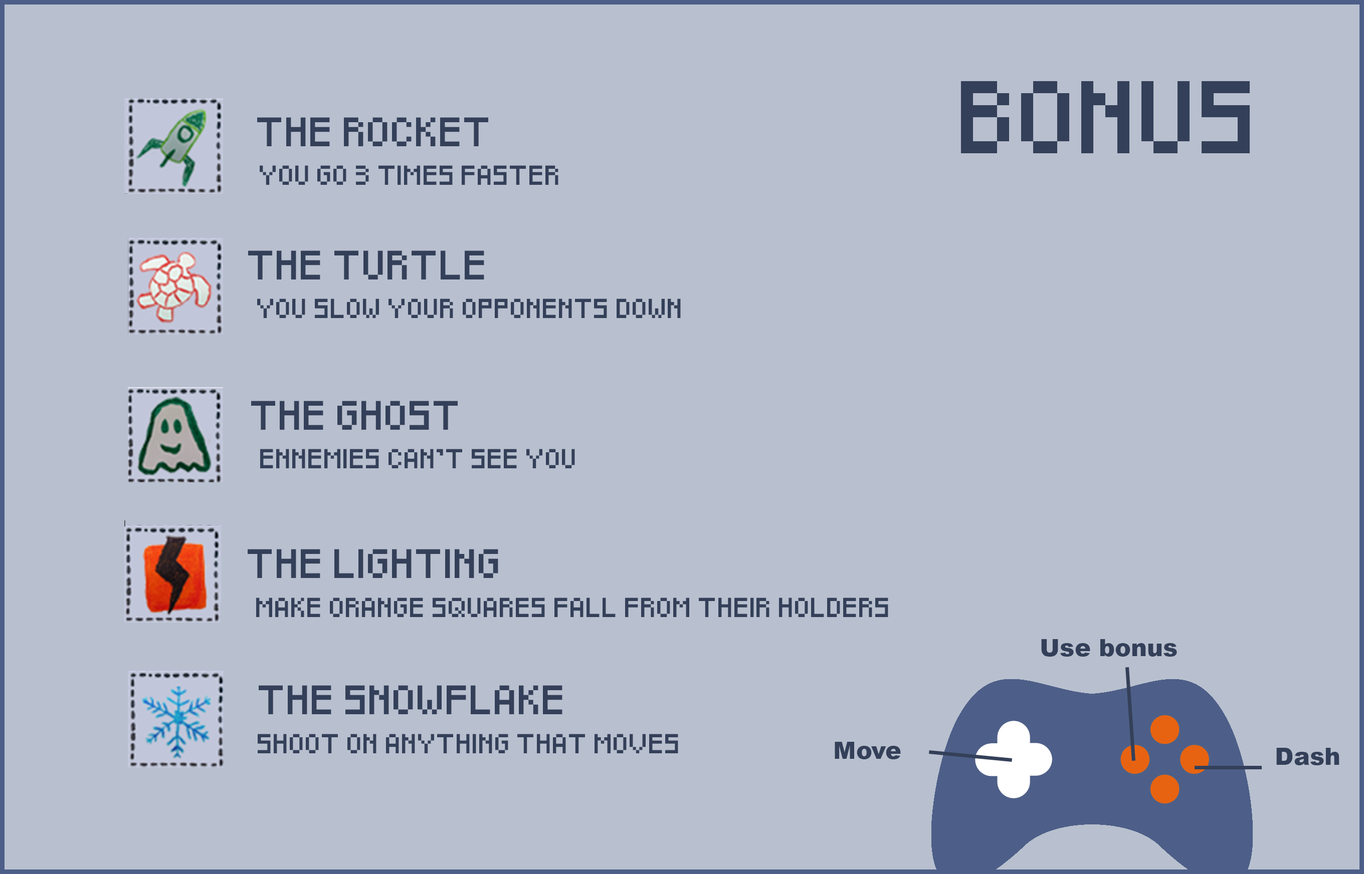
<style>
.page{position:relative;width:1364px;height:874px;background:#b8c0cf}
.page>*{position:absolute;margin:0}
.t1{font:60.1px "Pixeled";color:#344059}
.t2{font:24.1px "Pixeled";color:#344059}
.t3{font:16px "Pixeled";color:#344059}
.t4{font:24.1px "Arial-Black";color:#344059}
</style>
<div class="page">
<p class="t1" style="left:961px;top:81px;width:288px;height:72px">BONUS</p>
<p class="t2" style="left:257px;top:117px;width:231px;height:29px">THE ROCKET</p>
<p class="t3" style="left:260px;top:165px;width:298px;height:20px">YOU GO 3 TIMES FASTER</p>
<p class="t2" style="left:248px;top:251px;width:236px;height:29px">THE TURTLE</p>
<p class="t3" style="left:257px;top:299px;width:424px;height:19px">YOU SLOW YOUR OPPONENTS DOWN</p>
<p class="t2" style="left:251px;top:401px;width:207px;height:29px">THE GHOST</p>
<p class="t3" style="left:260px;top:449px;width:315px;height:20px">ENNEMIES CAN’T SEE YOU</p>
<p class="t2" style="left:248px;top:549px;width:250px;height:29px">THE LIGHTING</p>
<p class="t3" style="left:256px;top:598px;width:632px;height:19px">MAKE ORANGE SQUARES FALL FROM THEIR HOLDERS</p>
<p class="t4" style="left:1041px;top:639px;width:136px;height:18px">Use bonus</p>
<p class="t2" style="left:259px;top:686px;width:303px;height:29px">THE SNOWFLAKE</p>
<p class="t3" style="left:258px;top:734px;width:420px;height:20px">SHOOT ON ANYTHING THAT MOVES</p>
<p class="t4" style="left:834px;top:742px;width:67px;height:18px">Move</p>
<p class="t4" style="left:1276px;top:748px;width:63px;height:18px">Dash</p>
</div>
